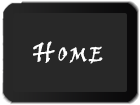
<style>
.page{position:relative;width:140px;height:105px;background:#282828}
.page>*{position:absolute;margin:0}
.t1{font:48px "VinerHandITC";letter-spacing:0.1em;color:#ffffff;font-variant:small-caps}
</style>
<div class="page">
<p class="t1" style="left:33px;top:41px;width:70px;height:23px">Home</p>
</div>
